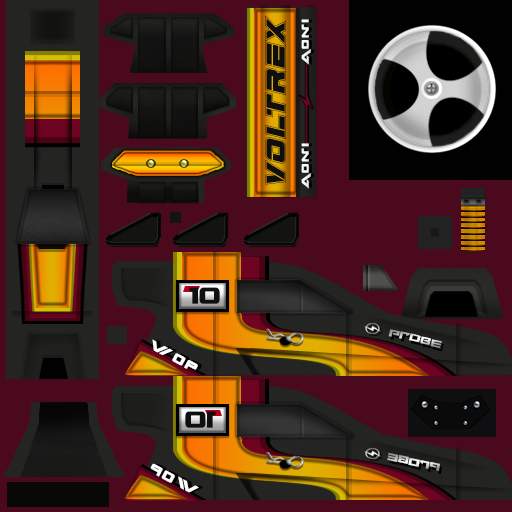
<style>
.page{position:relative;width:512px;height:512px;background:#4a091c}
.page>*{position:absolute;margin:0}
.t1{font:35.3px "EdgeRacerAcademyItalic";color:#0f0f12;scale:1.15 1}
.t2{font:14px "spacestation";color:#f9f9f9;scale:1.28 1}
.t3{font:30.6px "Tarrget";color:#0f0f12;scale:0.8 1}
.t4{font:18.2px "spacestation";color:#ffffff;scale:1.25 1}
.t5{font:30.8px "Tarrget";color:#0f0f12;scale:0.8 1}
.t6{font:13.3px "Tarrget";scale:0.91 1}
</style>
<div class="page">
<p class="t1" style="left:265px;top:15px;width:21px;height:170px;rotate:-90deg">voltrex</p>
<p class="t2" style="left:301px;top:19px;width:10px;height:46px;rotate:-90deg">AONI</p>
<p class="t2" style="left:301px;top:143px;width:10px;height:46px;rotate:-90deg">AONI</p>
<p class="t3" style="left:189px;top:287px;width:31px;height:17px">10</p>
<p class="t4" style="left:152px;top:339px;width:46px;height:31px;rotate:28deg">WOP</p>
<p class="t5" style="left:185px;top:411px;width:31px;height:17px;rotate:180deg">10</p>
<p class="t6" style="left:387px;top:452px;width:53px;height:19px;rotate:-168deg">PROBE</p>
<p class="t4" style="left:150px;top:463px;width:49px;height:30px;rotate:-152deg">WOP</p>
</div>
